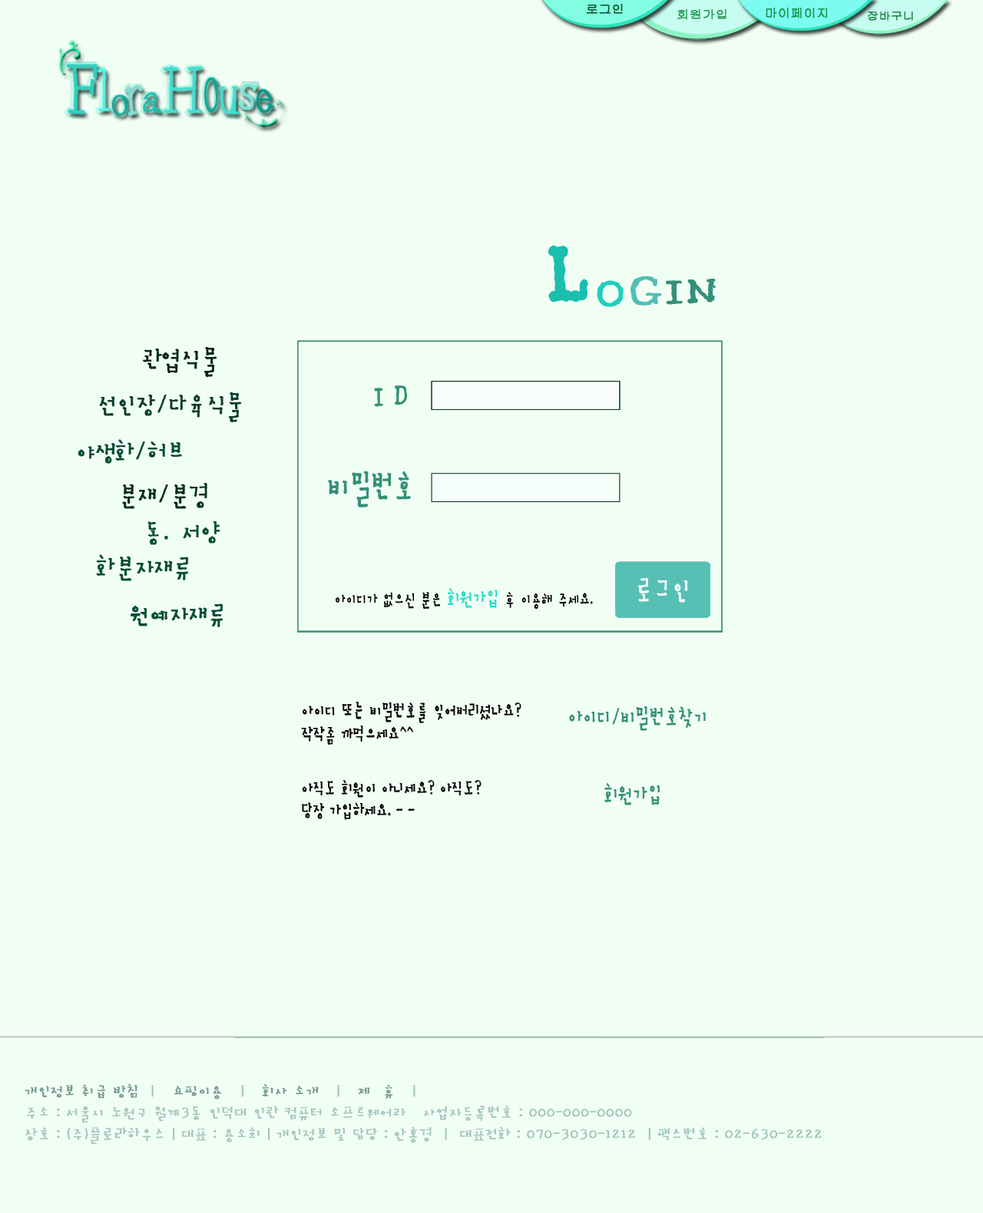
<style>
.page{position:relative;width:983px;height:1213px;background:#f1fef4}
.page>*{position:absolute;margin:0}
.t1{font:11.5px "Gulim";color:#095327;font-weight:bold;scale:1.1 1}
.t2{font:11.5px "Gulim";color:#1e9a50;font-weight:bold;scale:1.1 1}
.t3{font:11.5px "Gulim";color:#168f47;font-weight:bold;scale:1.1 1}
.t4{font:10.4px "Gulim";color:#198445;font-weight:bold;scale:1.13 1}
.t5{font:67.7px "Pinwheel";color:#2ed0bf;font-weight:bold;scale:0.82 1}
.t6{font:59.3px "Pinwheel";color:#4df7e6;font-weight:bold;scale:0.76 1}
.t7{font:36.1px "Pinwheel";color:#10a899;font-weight:bold}
.t8{font:62.6px "Pinwheel";color:#40e0d0;font-weight:bold;scale:0.8 1}
.t9{font:60.9px "Pinwheel";color:#0ba999;font-weight:bold;scale:0.53 1}
.t10{font:45.1px "Pinwheel";color:#40e0d0;font-weight:bold;scale:0.8 1}
.t11{font:45.1px "Pinwheel";color:#06998a;font-weight:bold;scale:0.8 1}
.t12{font:47px "Pinwheel";color:#6feadb;font-weight:bold;scale:0.88 1}
.t13{font:35.6px "Pinwheel";color:#0dc2af;font-weight:bold;scale:0.93 1}
.t14{font:53.8px "SanKrL";color:#359079;font-weight:bold;scale:1.1 1}
.t15{font:138.2px "SanKrL";color:#19bfaf;font-weight:bold;scale:0.72 1}
.t16{font:53.8px "SanKrL";color:#20cebd;font-weight:bold;scale:1.1 1}
.t17{font:53.8px "SanKrL";color:#52beb3;font-weight:bold;scale:1.1 1}
.t18{font:30.8px "SanKrL";color:#012419;font-weight:bold;scale:0.86 1}
.t19{font:41.5px "SanKrL";color:#359079;font-weight:bold;scale:0.72 1}
.t20{font:30.8px "SanKrL";color:#0e3e2f;font-weight:bold;scale:0.86 1}
.t21{font:30.8px "SanKrL";color:#074d37;font-weight:bold;scale:0.86 1}
.t22{font:30.8px "SanKrL";color:#05301e;font-weight:bold;scale:0.86 1}
.t23{font:34.6px "SanKrL";color:#fbfdfd;font-weight:bold;scale:0.72 1}
.t24{font:20.7px "SanKrL";color:#060606;font-weight:bold;scale:0.72 1}
.t25{font:24.9px "SanKrL";color:#23ddcb;font-weight:bold;scale:0.72 1}
.t26{font:22.1px "SanKrL";color:#040404;font-weight:bold;scale:0.72 1}
.t27{font:27.6px "SanKrL";color:#359079;font-weight:bold;scale:0.72 1}
.t28{font:17.7px "SanKrL";color:#a1c4bf;font-weight:bold}
.t29{font:17.7px "SanKrL";color:#719891;font-weight:bold}
</style>
<div class="page">
<p class="t1" style="left:586px;top:4px;width:37px;height:10px">로그인</p>
<p class="t2" style="left:677px;top:9px;width:49px;height:11px">회원가입</p>
<p class="t3" style="left:766px;top:8px;width:61px;height:10px">마이페이지</p>
<p class="t4" style="left:868px;top:12px;width:45px;height:9px">장바구니</p>
<p class="t5" style="left:66px;top:64px;width:208px;height:52px">F<span class="t6">l</span><span class="t7">o   </span><span class="t8">H</span><span class="t9">o</span><span class="t10">u </span><span class="t11">e</span></p>
<p class="t12" style="left:238px;top:84px;width:19px;height:26px;rotate:7deg">s</p>
<p class="t13" style="left:142px;top:92px;width:20px;height:21px;rotate:5deg">a</p>
<p class="t14" style="left:548px;top:245px;width:168px;height:62px"><span class="t15">L</span><span class="t16">O</span><span class="t17">G</span>IN</p>
<p class="t18" style="left:143px;top:347px;width:74px;height:30px">관엽식물</p>
<p class="t19" style="left:374px;top:385px;width:33px;height:22px">I D</p>
<p class="t20" style="left:99px;top:392px;width:143px;height:30px">선인장/다육식물</p>
<p class="t21" style="left:78px;top:439px;width:104px;height:25px">야생화/허브</p>
<p class="t19" style="left:328px;top:471px;width:83px;height:37px">비밀번호</p>
<p class="t22" style="left:122px;top:483px;width:85px;height:26px">분재/분경</p>
<p class="t21" style="left:147px;top:521px;width:73px;height:24px">동．서양</p>
<p class="t21" style="left:96px;top:554px;width:93px;height:27px">화분자재류</p>
<p class="t23" style="left:638px;top:578px;width:50px;height:25px">로그인</p>
<p class="t24" style="left:336px;top:588px;width:257px;height:21px">아이디가 없으신 분은 <span class="t25">회원가입</span> 후 이용해 주세요.</p>
<p class="t21" style="left:131px;top:604px;width:92px;height:23px">원예자재류</p>
<p class="t26" style="left:301px;top:702px;width:220px;height:43px">아이디 또는 비밀번호를 잊어버리셨나요?<br>작작좀 까먹으세요^^</p>
<p class="t27" style="left:569px;top:706px;width:137px;height:25px">아이디/비밀번호찾기</p>
<p class="t26" style="left:301px;top:780px;width:180px;height:40px">아직도 회원이 아니세요? 아직도? <br>당장 가입하세요. - -</p>
<p class="t27" style="left:604px;top:783px;width:56px;height:22px">회원가입</p>
<p class="t28" style="left:25px;top:1084px;width:797px;height:61px"><span class="t29">개인정보 취급 방침</span>  |   <span class="t29">쇼핑이용</span>   |   <span class="t29">회사 소개 </span>  |   <span class="t29">제  휴</span>   |<br>주소 : 서울시 노원구 월계3동 인덕대 인관 컴퓨터 소프트웨어과   사업자등록번호 : 000-000-0000   <br>상호 : (주)플로라하우스 | 대표 : 용소희 | 개인정보 및 담당 : 안홍경  |  대표전화 : 070-3030-1212  | 팩스번호 : 02-630-2222</p>
</div>
